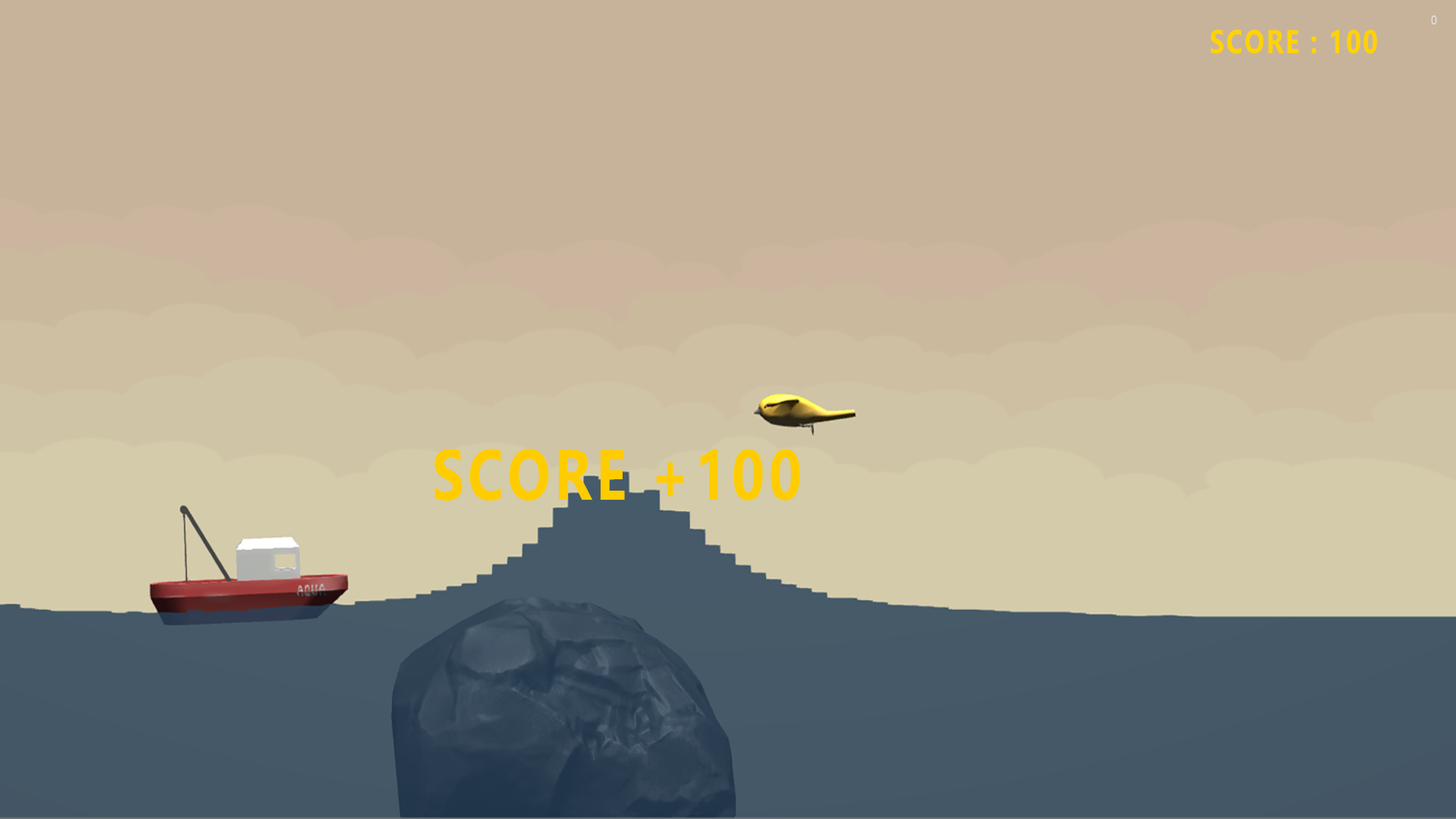
<style>
.page{position:relative;width:1456px;height:819px;background:#c7b39a}
.page>*{position:absolute;margin:0}
.t1{font:32.8px "LeelawadeeUI-Bold";letter-spacing:0.075em;color:#ffd200;scale:0.8 1}
.t2{font:71.1px "LeelawadeeUI-Bold";letter-spacing:0.075em;color:#ffcc00;scale:0.8 1}
</style>
<div class="page">
<p class="t1" style="left:1210px;top:30px;width:167px;height:24px">SCORE : 100</p>
<p class="t2" style="left:435px;top:449px;width:365px;height:52px">SCORE +100</p>
</div>
